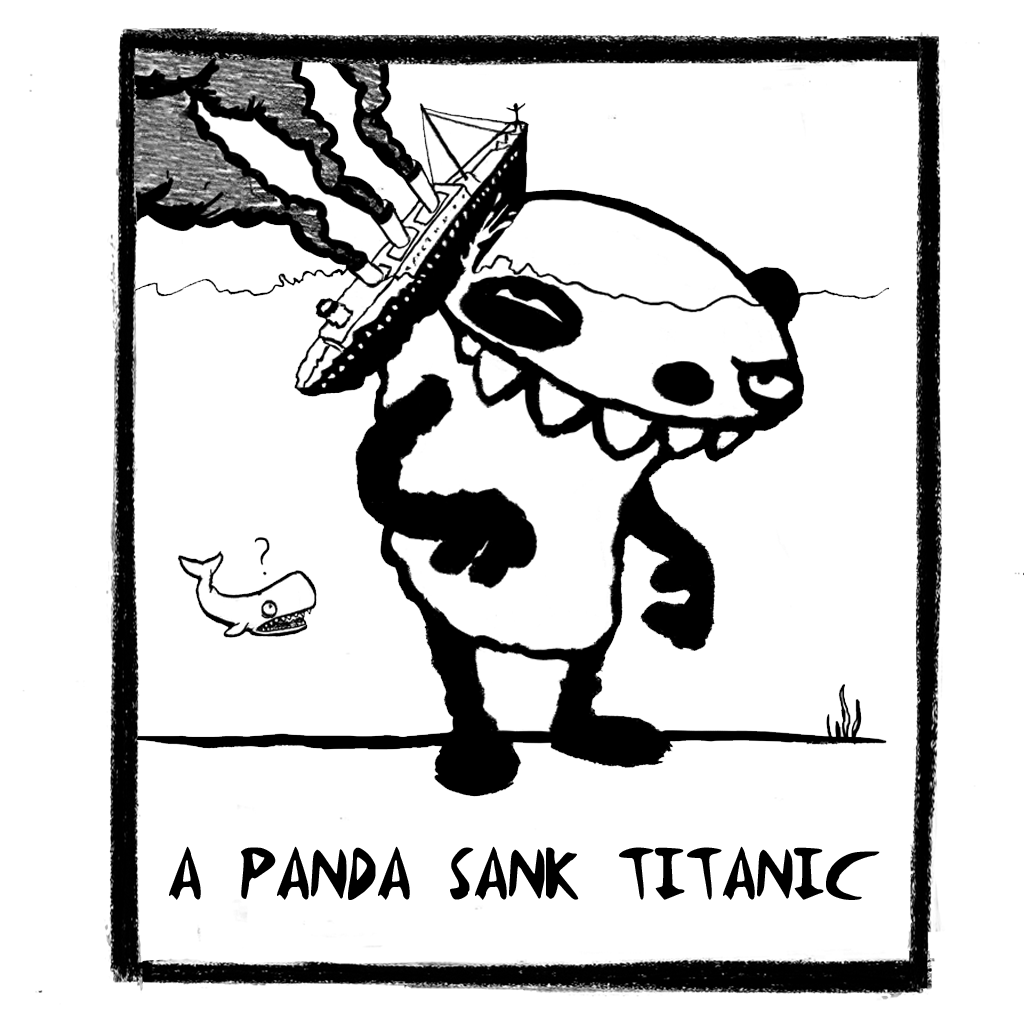
<style>
.page{position:relative;width:1024px;height:1024px;background:#ffffff}
.page>*{position:absolute;margin:0}
.t1{font:91.7px "Panda";color:#000000;text-transform:uppercase}
</style>
<div class="page">
<p class="t1" style="left:169px;top:846px;width:711px;height:54px">A PANDA SANK TITANIC</p>
</div>
